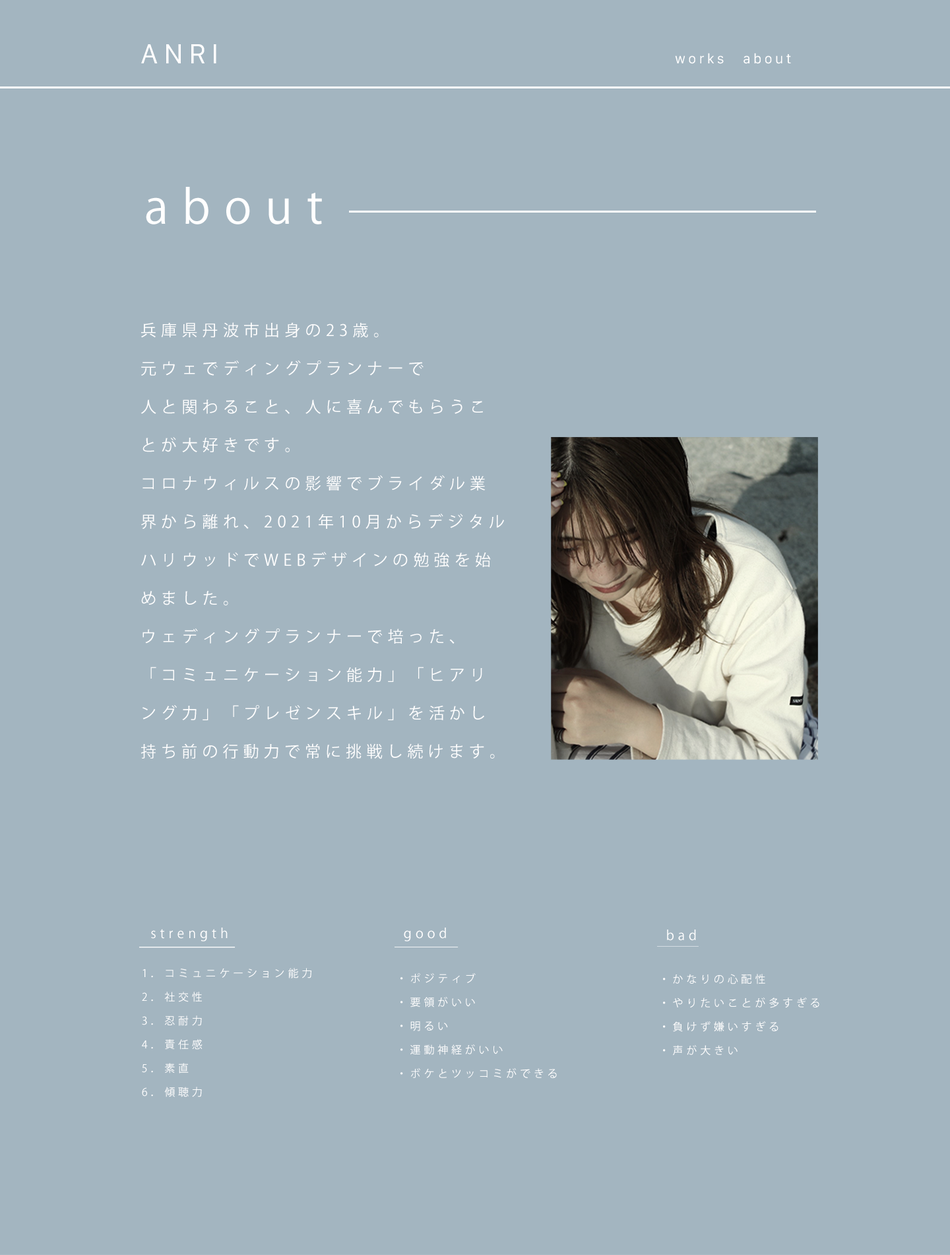
<style>
.page{position:relative;width:950px;height:1255px;background:#a3b5c0}
.page>*{position:absolute;margin:0}
.t1{font:26.4px "Galvji";letter-spacing:0.2em;color:#ffffff}
.t2{font:13.2px "Galvji";letter-spacing:0.2em;color:#ffffff}
.t3{font:46.2px "KozGoPr6N-Regular";letter-spacing:0.3em;color:#ffffff}
.t4{font:15.8px/38.3px "KozGoPr6N-Regular";letter-spacing:0.3em;color:#ffffff}
.t5{font:13.2px "KozGoPr6N-Regular";letter-spacing:0.3em;color:#ffffff}
.t6{font:10.6px/23.8px "KozGoPr6N-Regular";letter-spacing:0.3em;color:#ffffff}
</style>
<div class="page">
<p class="t1" style="left:141px;top:44px;width:75px;height:19px">ANRI</p>
<p class="t2" style="left:675px;top:53px;width:49px;height:11px">works</p>
<p class="t2" style="left:744px;top:53px;width:47px;height:11px">about</p>
<p class="t3" style="left:146px;top:187px;width:176px;height:37px">about</p>
<p class="t4" style="left:141px;top:322px;width:363px;height:437px">兵庫県丹波市出身の23歳。<br>元ウェでディングプランナーで<br>人と関わること、人に喜んでもらうことが大好きです。<br>コロナウィルスの影響でブライダル業界から離れ、2021年10月からデジタルハリウッドでWEBデザインの勉強を始めました。<br>ウェディングプランナーで培った、<br>「コミュニケーション能力」「ヒアリング力」「プレゼンスキル」を活かし持ち前の行動力で常に挑戦し続けます。</p>
<p class="t5" style="left:151px;top:927px;width:77px;height:14px">strength</p>
<p class="t5" style="left:404px;top:927px;width:42px;height:14px">good</p>
<p class="t5" style="left:667px;top:929px;width:29px;height:12px">bad</p>
<p class="t6" style="left:142px;top:968px;width:170px;height:129px">1．コミュニケーション能力<br>2．社交性<br>3．忍耐力<br>4．責任感<br>5．素直<br>6．傾聴力</p>
<p class="t6" style="left:401px;top:973px;width:156px;height:105px">・ポジティブ<br>・要領がいい<br>・明るい<br>・運動神経がいい<br>・ボケとツッコミができる</p>
<p class="t6" style="left:663px;top:974px;width:157px;height:81px">・かなりの心配性<br>・やりたいことが多すぎる<br>・負けず嫌いすぎる<br>・声が大きい</p>
</div>
